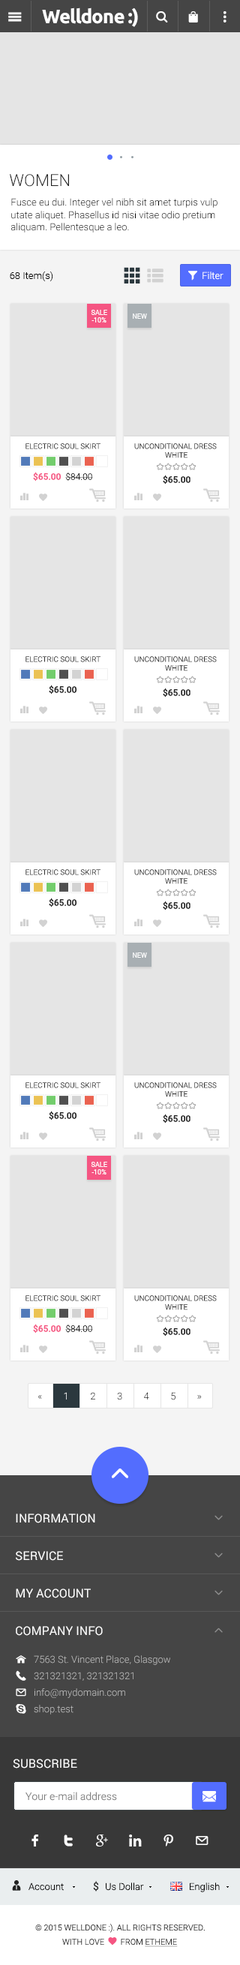
<style>
.page{position:relative;width:240px;height:1965px;background:#e5e5e5}
.page>*{position:absolute;margin:0}
.t1{font:19.5px "Ubuntu-Bold";letter-spacing:-0.04em;color:#ffffff}
.t2{font:16.5px "Roboto-Light";color:#212121;text-transform:uppercase}
.t3{font:9.7px/12.3px "Roboto-Light";color:#000000}
.t4{font:9.7px "Roboto-Light";color:#000000}
.t5{font:9.7px "Roboto-Light";color:#ffffff}
.t6{font:6.7px/7.5px "Roboto-Regular";color:#ffffff;text-transform:uppercase}
.t7{font:6.7px "Roboto-Regular";color:#ffffff;text-transform:uppercase}
.t8{font:7.5px "Roboto-Light";color:#2b2b2b;text-transform:uppercase}
.t9{font:7.5px/8.8px "Roboto-Light";color:#2b2b2b;text-transform:uppercase}
.t10{font:9px "Roboto-Medium";color:#f55582}
.t11{font:9px "Roboto-Light";color:#212121}
.t12{font:9px "Roboto-Medium";color:#212121}
.t13{font:12px/37.5px "Roboto-Regular";color:#ffffff;text-transform:uppercase}
.t14{font:9.7px/16.5px "Roboto-Light";color:#bbbbbb}
.t15{font:12px "Roboto-Regular";color:#ffffff;text-transform:uppercase}
.t16{font:10.5px "Roboto-Light";color:#848484}
.t17{font:10.5px "Roboto-Regular";color:#212121}
.t18{font:8.2px "Roboto-Light";color:#2b2b2b;text-transform:uppercase}
</style>
<div class="page">
<p class="t1" style="left:42px;top:7px;width:96px;height:20px">Welldone :)</p>
<p class="t2" style="left:10px;top:174px;width:59px;height:13px">Women</p>
<p class="t3" style="left:11px;top:198px;width:206px;height:34px">Fusce eu dui. Integer vel nibh sit amet turpis vulp utate aliquet. Phasellus id nisi vitae odio pretium aliquam. Pellentesque a leo. <br><br><br>lectus sed felis. Quisque vestibulum massa.</p>
<p class="t4" style="left:10px;top:271px;width:43px;height:10px">68 Item(s)</p>
<p class="t5" style="left:202px;top:271px;width:21px;height:9px">Filter</p>
<p class="t6" style="left:91px;top:310px;width:16px;height:12px;text-align:center">sale<br>-10%</p>
<p class="t7" style="left:133px;top:313px;width:14px;height:6px">new</p>
<p class="t8" style="left:25px;top:443px;width:75px;height:6px">Electric Soul Skirt</p>
<p class="t9" style="left:134px;top:443px;width:83px;height:15px;text-align:center">Unconditional Dress <br>White</p>
<p class="t10" style="left:33px;top:472px;width:60px;height:9px">$65.00  <span class="t11">$84.00</span></p>
<p class="t12" style="left:163px;top:475px;width:27px;height:9px">$65.00</p>
<p class="t8" style="left:25px;top:656px;width:75px;height:6px">Electric Soul Skirt</p>
<p class="t9" style="left:134px;top:656px;width:83px;height:15px;text-align:center">Unconditional Dress <br>White</p>
<p class="t12" style="left:49px;top:685px;width:27px;height:9px">$65.00</p>
<p class="t12" style="left:163px;top:688px;width:27px;height:9px">$65.00</p>
<p class="t8" style="left:25px;top:869px;width:75px;height:6px">Electric Soul Skirt</p>
<p class="t9" style="left:134px;top:869px;width:83px;height:15px;text-align:center">Unconditional Dress <br>White</p>
<p class="t12" style="left:49px;top:898px;width:27px;height:9px">$65.00</p>
<p class="t12" style="left:163px;top:901px;width:27px;height:9px">$65.00</p>
<p class="t7" style="left:133px;top:952px;width:14px;height:6px">new</p>
<p class="t8" style="left:25px;top:1082px;width:75px;height:6px">Electric Soul Skirt</p>
<p class="t9" style="left:134px;top:1082px;width:83px;height:15px;text-align:center">Unconditional Dress <br>White</p>
<p class="t12" style="left:49px;top:1111px;width:27px;height:9px">$65.00</p>
<p class="t12" style="left:163px;top:1114px;width:27px;height:9px">$65.00</p>
<p class="t6" style="left:91px;top:1162px;width:16px;height:12px;text-align:center">sale<br>-10%</p>
<p class="t8" style="left:25px;top:1295px;width:75px;height:6px">Electric Soul Skirt</p>
<p class="t9" style="left:134px;top:1295px;width:83px;height:15px;text-align:center">Unconditional Dress <br>White</p>
<p class="t10" style="left:33px;top:1324px;width:60px;height:9px">$65.00  <span class="t11">$84.00</span></p>
<p class="t12" style="left:163px;top:1327px;width:27px;height:9px">$65.00</p>
<p class="t13" style="left:16px;top:1513px;width:87px;height:123px">Information<br>service<br>My account<br>Company Info</p>
<p class="t14" style="left:34px;top:1655px;width:136px;height:59px">7563 St. Vincent Place, Glasgow<br>321321321, 321321321<br>info@mydomain.com<br>shop.test</p>
<p class="t15" style="left:13px;top:1759px;width:64px;height:9px">Subscribe</p>
<p class="t16" style="left:25px;top:1792px;width:92px;height:9px">Your e-mail address</p>
<p class="t4" style="left:28px;top:1882px;width:36px;height:9px">Account</p>
<p class="t17" style="left:93px;top:1881px;width:6px;height:10px">$</p>
<p class="t4" style="left:106px;top:1882px;width:38px;height:9px">Us Dollar</p>
<p class="t4" style="left:190px;top:1882px;width:30px;height:10px">English</p>
<p class="t18" style="left:35px;top:1924px;width:170px;height:9px">© 2015 Welldone :). All Rights Reserved.</p>
</div>
